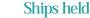
<style>
.page{position:relative;width:90px;height:18px;background:#ffffff}
.page>*{position:absolute;margin:0}
.t1{font:16px "HeiseiMinStd-W7";letter-spacing:-0.04em;color:#25a2a2}
</style>
<div class="page">
<p class="t1" style="left:24px;top:1px;width:66px;height:17px">Ships held</p>
</div>
